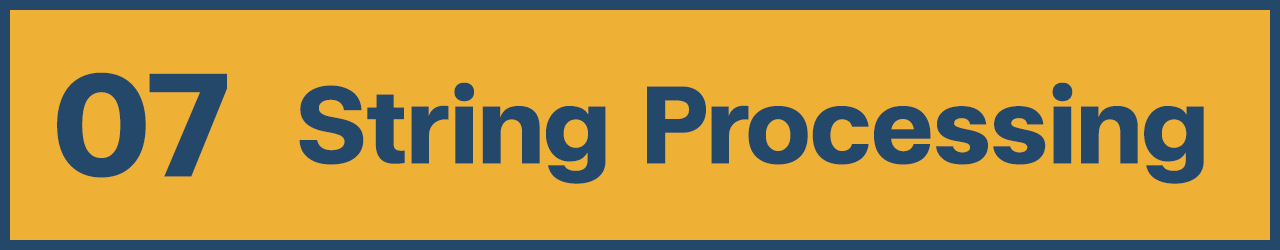
<style>
.page{position:relative;width:1280px;height:250px;background:#efb036}
.page>*{position:absolute;margin:0}
.t1{font:200px "FCMinimalBold";color:#23486a}
.t2{font:150px "FCMinimalBold";color:#23486a}
</style>
<div class="page">
<p class="t1" style="left:57px;top:72px;width:170px;height:106px">07</p>
<p class="t2" style="left:299px;top:82px;width:905px;height:102px">String Processing</p>
</div>
